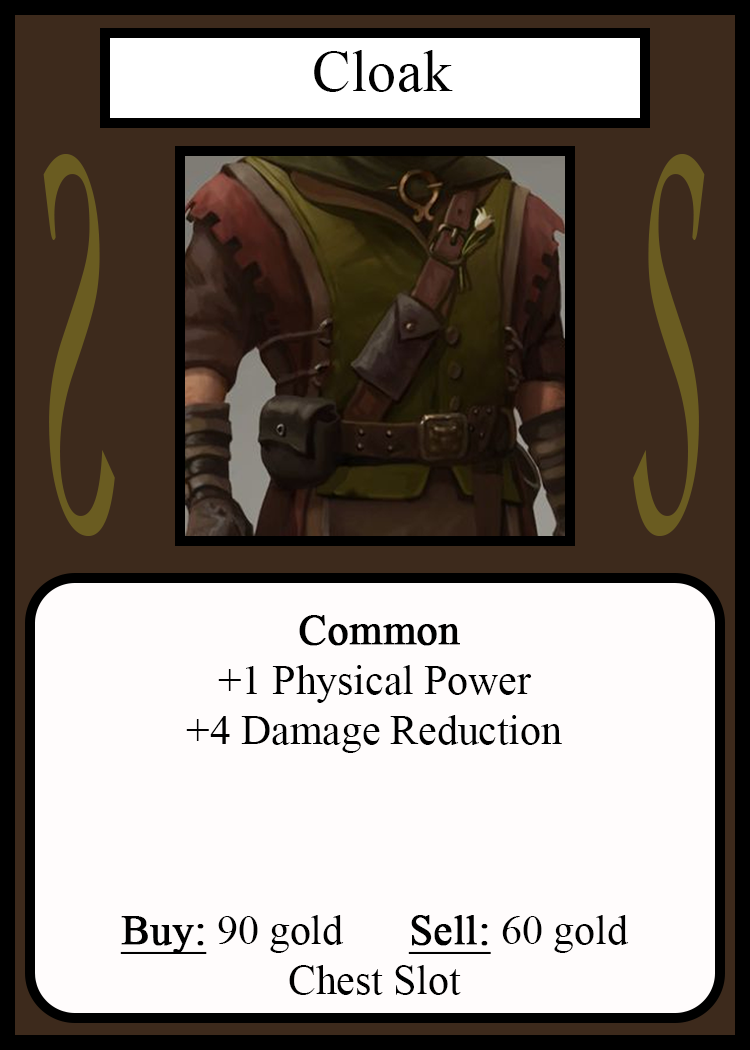
<style>
.page{position:relative;width:750px;height:1050px;background:#fffcfc}
.page>*{position:absolute;margin:0}
.t1{font:58.3px "TimesNewRomanPSMT";color:#010101}
.t2{font:548.5px "Apple-Chancery";color:#6a5c21;scale:0.27 1}
.t3{font:548.2px "Apple-Chancery";color:#6a5c21;scale:0.27 1}
.t4{font:41.7px "TimesNewRomanPSMT";color:#000000}
.t5{font:41.7px "TimesNewRomanPSMT";color:#000000;font-weight:bold}
.t6{font:41.7px "TimesNewRomanPSMT";color:#000000;font-weight:bold;text-decoration:underline}
</style>
<div class="page">
<p class="t1" style="left:314px;top:50px;width:139px;height:42px">Cloak</p>
<p class="t2" style="left:43px;top:154px;width:72px;height:382px;rotate:180deg">S</p>
<p class="t3" style="left:633px;top:154px;width:72px;height:382px">S</p>
<p class="t4" style="left:120px;top:615px;width:509px;height:380px;text-align:center"><span class="t5">Common<br></span>+1 Physical Power<br>+4 Damage Reduction<br><br><br><br><span class="t6">Buy:</span> 90 gold   <span class="t6">Sell:</span> 60 gold<br>Chest Slot</p>
</div>
